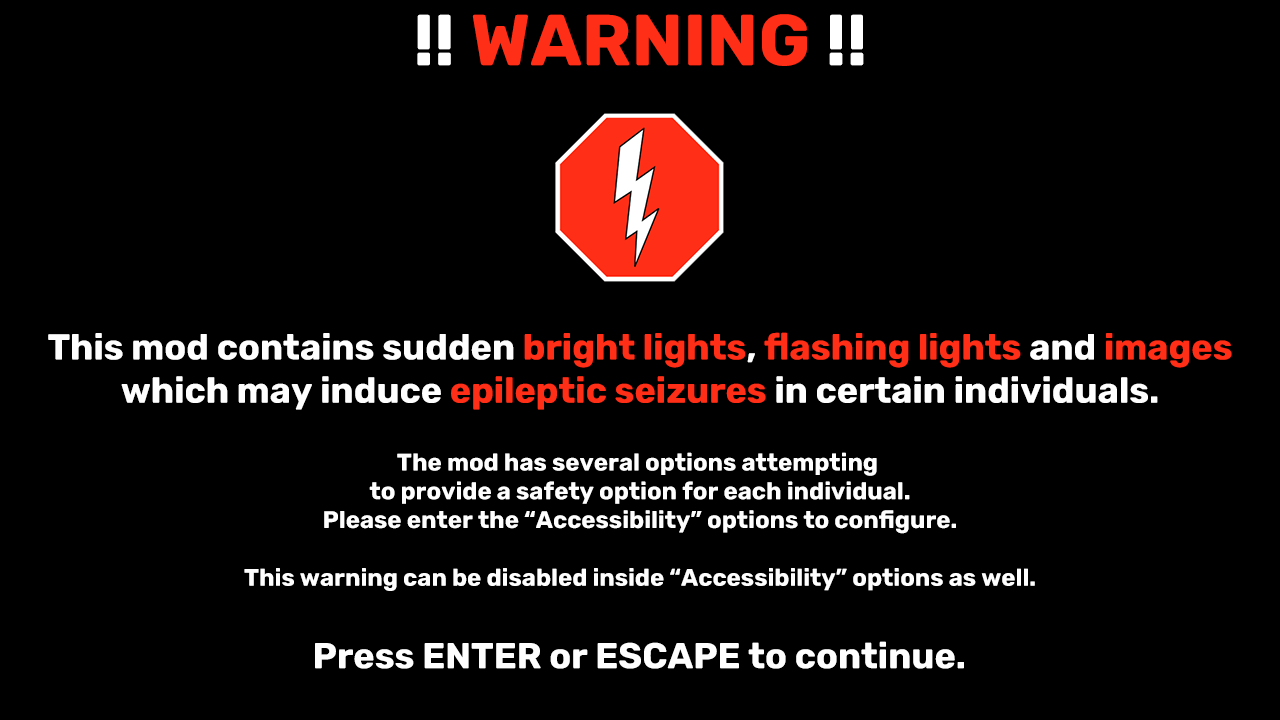
<style>
.page{position:relative;width:1280px;height:720px;background:#000000}
.page>*{position:absolute;margin:0}
.t1{font:72px "Rubik-Bold";color:#ff2f17}
.t2{font:72px "Rubik-Bold";color:#ffffff}
.t3{font:36px "Rubik-Bold";color:#fefefe}
.t4{font:36px "Rubik-Bold";color:#ff2f17}
.t5{font:24px "Rubik-Bold";color:#fefefe}
</style>
<div class="page">
<p class="t1" style="left:417px;top:14px;width:447px;height:52px"><span class="t2">!!</span> WARNING <span class="t2">!!</span></p>
<p class="t3" style="left:48px;top:332px;width:1184px;height:78px;text-align:center">This mod contains sudden <span class="t4">bright lights</span>, <span class="t4">flashing lights</span> and <span class="t4">images<br></span>which may induce <span class="t4">epileptic seizures</span> in certain individuals.</p>
<p class="t5" style="left:244px;top:452px;width:791px;height:139px;text-align:center">The mod has several options attempting <br>to provide a safety option for each individual.<br>Please enter the “Accessibility” options to configure.<br><br>This warning can be disabled inside “Accessibility” options as well.</p>
<p class="t3" style="left:315px;top:641px;width:649px;height:28px">Press ENTER or ESCAPE to continue.</p>
</div>
